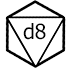
<style>
.page{position:relative;width:70px;height:70px;background:#ffffff}
.page>*{position:absolute;margin:0}
.t1{font:21px "Tahoma";color:#000000}
</style>
<div class="page">
<p class="t1" style="left:23px;top:23px;width:23px;height:17px">d8</p>
</div>
